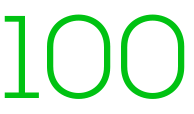
<style>
.page{position:relative;width:194px;height:114px;background:#ffffff}
.page>*{position:absolute;margin:0}
.t1{font:117.7px "NexaLight";color:#00c212}
</style>
<div class="page">
<p class="t1" style="left:4px;top:14px;width:181px;height:85px">100</p>
</div>
